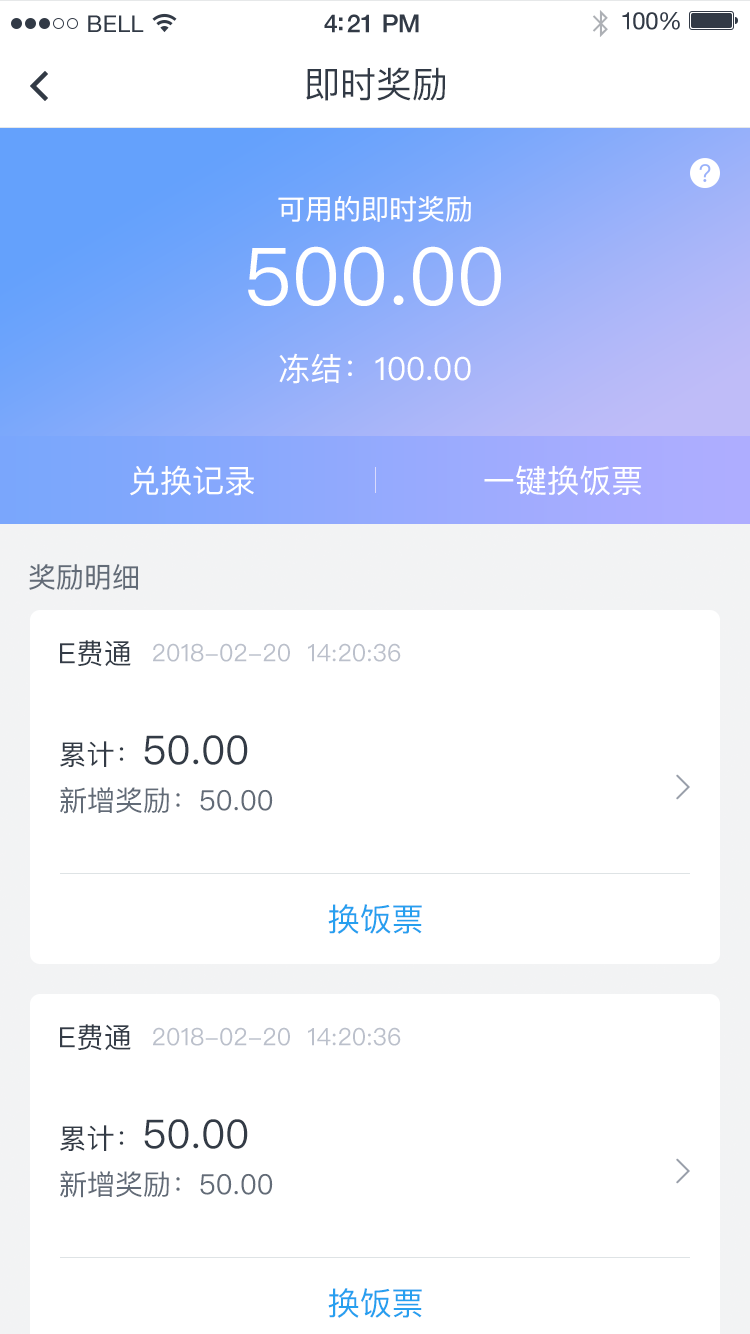
<style>
.page{position:relative;width:750px;height:1334px;background:#ffffff}
.page>*{position:absolute;margin:0}
.t1{font:23px "HelveticaNeue";letter-spacing:0.02em;color:#323a46}
.t2{font:25px "HelveticaNeue-Medium";letter-spacing:-0.02em;color:#323a46}
.t3{font:24px "HelveticaNeue";letter-spacing:-0.02em;color:#323a46}
.t4{font:36px "PingFangSC-Regular";color:#323a46}
.t5{font:28px "PingFangSC-Regular";color:#ffffff}
.t6{font:80px "PingFangSC-Regular";color:#ffffff}
.t7{font:32px "PingFangSC-Regular";color:#ffffff}
.t8{font:28px "PingFangSC-Regular";color:#626b77}
.t9{font:28px "PingFangSC-Regular";color:#333b46}
.t10{font:24px "PingFangSC-Regular";color:#bbc0cb}
.t11{font:40px "PingFangSC-Regular";color:#333b46}
.t12{font:32px "PingFangSC-Regular";color:#269fef}
</style>
<div class="page">
<p class="t1" style="left:88px;top:15px;width:56px;height:17px">BELL</p>
<p class="t2" style="left:324px;top:14px;width:95px;height:19px">4:21 PM</p>
<p class="t3" style="left:622px;top:12px;width:58px;height:18px">100%</p>
<p class="t4" style="left:306px;top:67px;width:139px;height:34px">即时奖励</p>
<p class="t5" style="left:278px;top:196px;width:193px;height:26px">可用的即时奖励</p>
<p class="t6" style="left:248px;top:246px;width:253px;height:60px">500.00</p>
<p class="t7" style="left:279px;top:353px;width:192px;height:31px">冻结：100.00</p>
<p class="t7" style="left:130px;top:465px;width:124px;height:31px">兑换记录</p>
<p class="t7" style="left:484px;top:465px;width:158px;height:31px">一键换饭票</p>
<p class="t8" style="left:29px;top:564px;width:109px;height:26px">奖励明细</p>
<p class="t9" style="left:60px;top:640px;width:71px;height:27px">E费通</p>
<p class="t10" style="left:153px;top:643px;width:248px;height:19px">2018-02-20  14:20:36</p>
<p class="t11" style="left:60px;top:735px;width:188px;height:32px"><span class="t9">累计：</span>50.00</p>
<p class="t8" style="left:60px;top:787px;width:213px;height:27px">新增奖励：50.00</p>
<p class="t12" style="left:328px;top:904px;width:94px;height:30px">换饭票</p>
<p class="t9" style="left:60px;top:1024px;width:71px;height:27px">E费通</p>
<p class="t10" style="left:153px;top:1027px;width:248px;height:19px">2018-02-20  14:20:36</p>
<p class="t11" style="left:60px;top:1119px;width:188px;height:32px"><span class="t9">累计：</span>50.00</p>
<p class="t8" style="left:60px;top:1171px;width:213px;height:27px">新增奖励：50.00</p>
<p class="t12" style="left:328px;top:1288px;width:94px;height:30px">换饭票</p>
</div>
